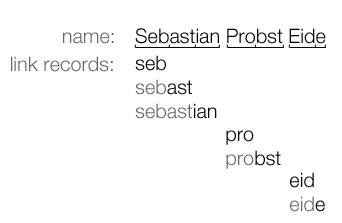
<style>
.page{position:relative;width:342px;height:223px;background:#ffffff}
.page>*{position:absolute;margin:0}
.t1{font:20px "HelveticaNeue-Light";color:#000000}
.t2{font:20px "HelveticaNeue-Light";color:#666666}
</style>
<div class="page">
<p class="t1" style="left:135px;top:28px;width:191px;height:16px">Sebastian Probst Eide</p>
<p class="t2" style="left:63px;top:32px;width:51px;height:12px">name:</p>
<p class="t2" style="left:11px;top:56px;width:102px;height:16px">link records:</p>
<p class="t2" style="left:135px;top:55px;width:82px;height:64px"><span class="t1">seb<br></span>seb<span class="t1">ast<br></span>sebast<span class="t1">ian</span></p>
<p class="t1" style="left:226px;top:130px;width:55px;height:39px">pro<br><span class="t2">pro</span>bst</p>
<p class="t1" style="left:290px;top:172px;width:35px;height:40px">eid<br><span class="t2">eid</span>e</p>
</div>
